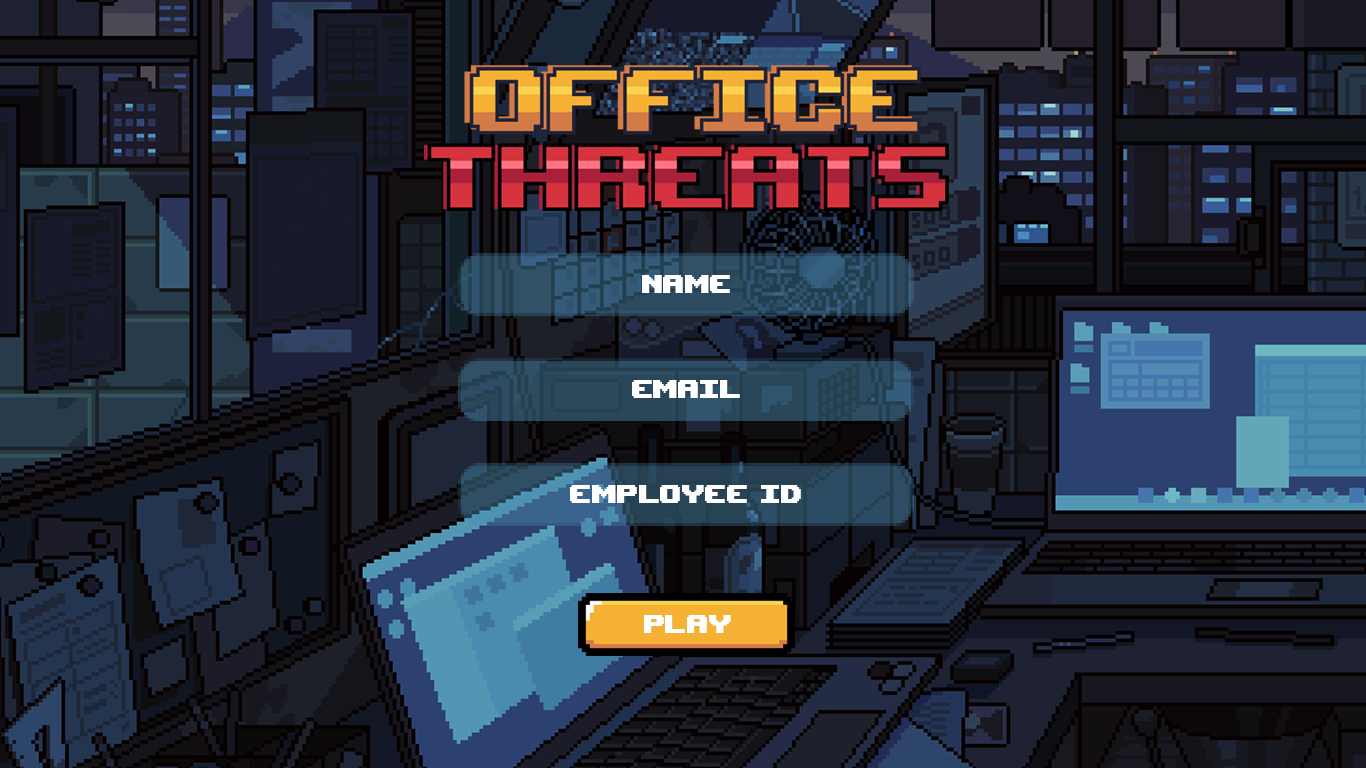
<style>
.page{position:relative;width:1366px;height:768px}
.page>*{position:absolute;margin:0}
.t1{font:36px "UpheavalTT-BRK-";color:#ffffff}
</style>
<div class="page">
<p class="t1" style="left:642px;top:275px;width:88px;height:18px">NAME</p>
<p class="t1" style="left:632px;top:380px;width:108px;height:18px">eMAIL</p>
<p class="t1" style="left:570px;top:485px;width:231px;height:18px">employee id</p>
<p class="t1" style="left:644px;top:615px;width:87px;height:18px">play</p>
</div>
